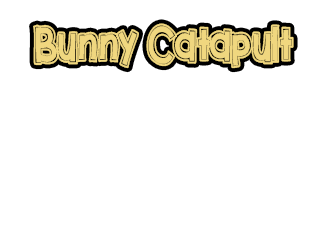
<style>
.page{position:relative;width:320px;height:240px;background:#ffffff}
.page>*{position:absolute;margin:0}
.t1{font:48px "KBDunkTank";letter-spacing:-0.05em;color:#f0d77f;scale:0.8 1}
</style>
<div class="page">
<p class="t1" style="left:33px;top:23px;width:261px;height:46px">Bunny Catapult</p>
</div>
